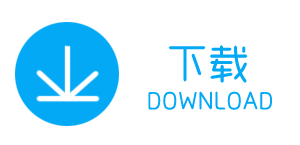
<style>
.page{position:relative;width:300px;height:145px;background:#ffffff}
.page>*{position:absolute;margin:0}
.t1{font:41.7px "RTWSYueRoudGoDemo-Regular";color:#03a9f4}
.t2{font:25px "RTWSYueRoudGoDemo-Regular";color:#03a9f4}
</style>
<div class="page">
<p class="t1" style="left:168px;top:45px;width:80px;height:38px">下载</p>
<p class="t2" style="left:148px;top:91px;width:124px;height:19px">DOWNLOAD</p>
</div>
